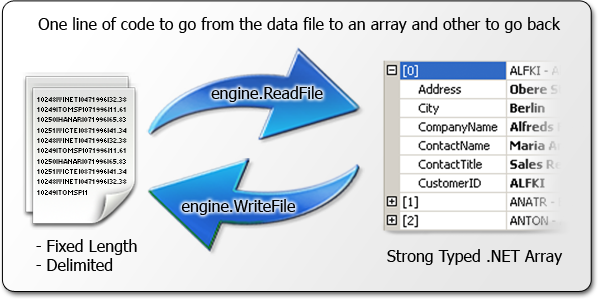
<style>
.page{position:relative;width:598px;height:300px}
.page>*{position:absolute;margin:0}
.t1{font:16.1px "Tahoma";color:#000000}
.t2{font:6.9px/10.3px "Small Fonts";color:#000000}
</style>
<div class="page">
<p class="t1" style="left:38px;top:17px;width:523px;height:16px">One line of code to go from the data file to an array and other to go back</p>
<p class="t1" style="left:211px;top:86px;width:112px;height:16px">engine.ReadFile</p>
<p class="t2" style="left:37px;top:97px;width:90px;height:98px">10248|VINET|0471996|32.38<br>10249|TOMSP|071996|11.61<br>10250|HANAR|071996|65.83<br>10251|VICTE|0871996|41.34<br>10248|VINET|0471996|32.38<br>10249|TOMSP|071996|11.61<br>10250|HANAR|071996|65.83<br>10251|VICTE|0871996|41.34<br>10248|VINET|0471996|32.38<br>10249|TOMSP|1</p>
<p class="t1" style="left:181px;top:199px;width:115px;height:16px">engine.WriteFile</p>
<p class="t1" style="left:36px;top:239px;width:101px;height:32px">- Fixed Length<br>- Delimited</p>
<p class="t1" style="left:387px;top:249px;width:176px;height:16px">Strong Typed .NET Array</p>
</div>
